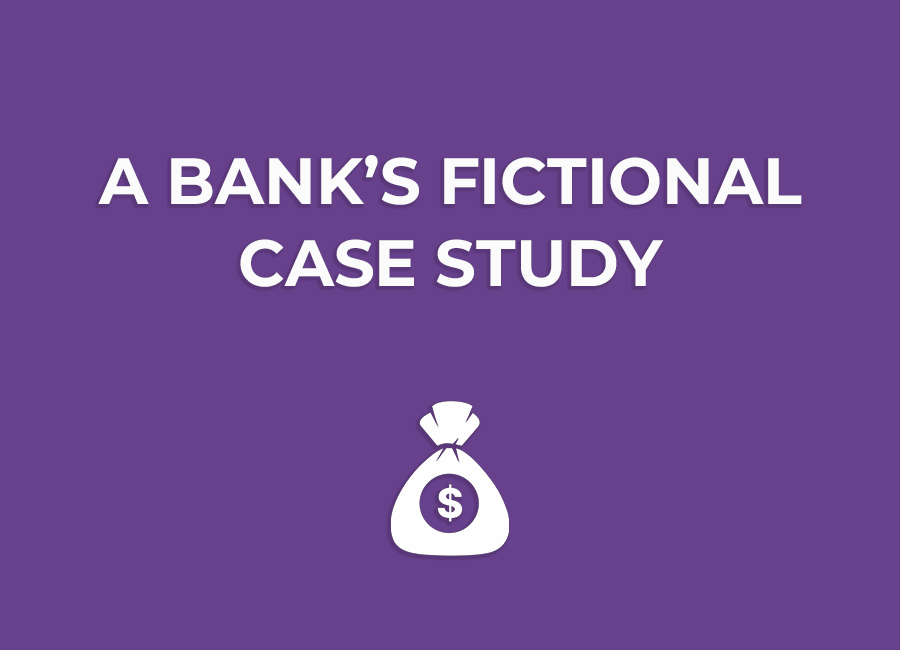
<style>
.page{position:relative;width:900px;height:650px;background:#68418d}
.page>*{position:absolute;margin:0}
.t1{font:65.3px/82px "Montserrat-Bold";color:#fbfbfb}
</style>
<div class="page">
<p class="t1" style="left:98px;top:155px;width:704px;height:132px;text-align:center">A BANK’S FICTIONAL CASE STUDY</p>
</div>
